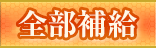
<style>
.page{position:relative;width:156px;height:48px}
.page>*{position:absolute;margin:0}
.t1{font:30px "RyuminPr6N-ExBold";color:#fff8e7}
</style>
<div class="page">
<p class="t1" style="left:18px;top:9px;width:119px;height:29px">全部補給</p>
</div>
